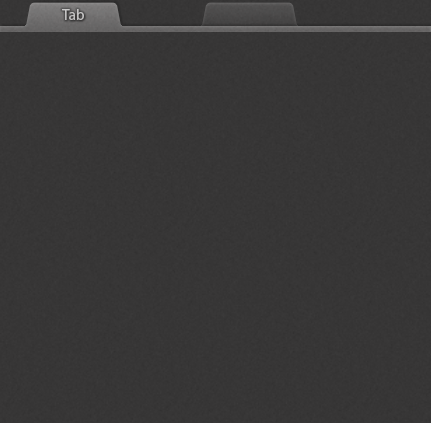
<style>
.page{position:relative;width:431px;height:423px;background:#373636}
.page>*{position:absolute;margin:0}
.t1{font:15px "MyriadPro-Regular";color:#d7d6d6}
</style>
<div class="page">
<p class="t1" style="left:62px;top:9px;width:22px;height:11px">Tab</p>
</div>
